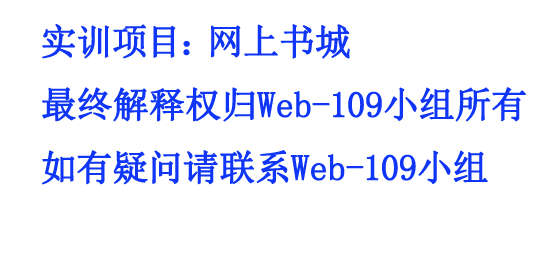
<style>
.page{position:relative;width:556px;height:255px;background:#ffffff}
.page>*{position:absolute;margin:0}
.t1{font:36px "SimSun";color:#0f35f6;font-weight:bold}
</style>
<div class="page">
<p class="t1" style="left:42px;top:24px;width:484px;height:161px">实训项目：网上书城<br>最终解释权归Web-109小组所有<br>如有疑问请联系Web-109小组</p>
</div>
